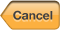
<style>
.page{position:relative;width:60px;height:30px;background:#fcb040}
.page>*{position:absolute;margin:0}
.t1{font:12px "HelveticaNeue-Bold";color:#404041}
</style>
<div class="page">
<p class="t1" style="left:13px;top:10px;width:40px;height:10px">Cancel</p>
</div>
